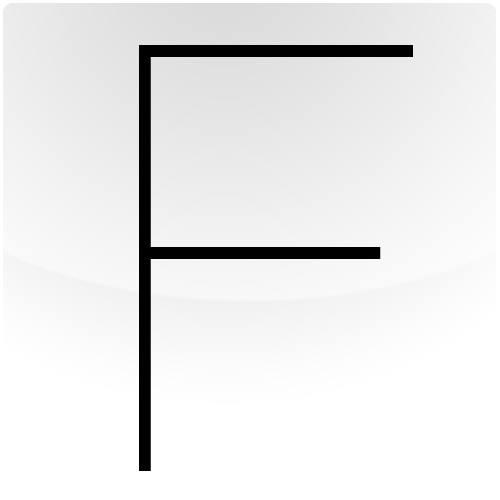
<style>
.page{position:relative;width:500px;height:500px;background:#ffffff}
.page>*{position:absolute;margin:0}
.t1{font:599px "Raleway-Thin";color:#000000}
</style>
<div class="page">
<p class="t1" style="left:139px;top:45px;width:274px;height:426px">F</p>
</div>
